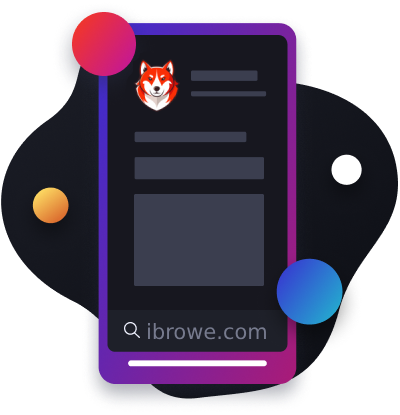
<style>
.page{position:relative;width:400px;height:415px;background:#ffffff}
.page>*{position:absolute;margin:0}
.t1{font:21px "DejaVuSans";color:#777b8e}
</style>
<div class="page">
<p class="t1" style="left:148px;top:323px;width:118px;height:17px">ibrowe.com</p>
</div>
